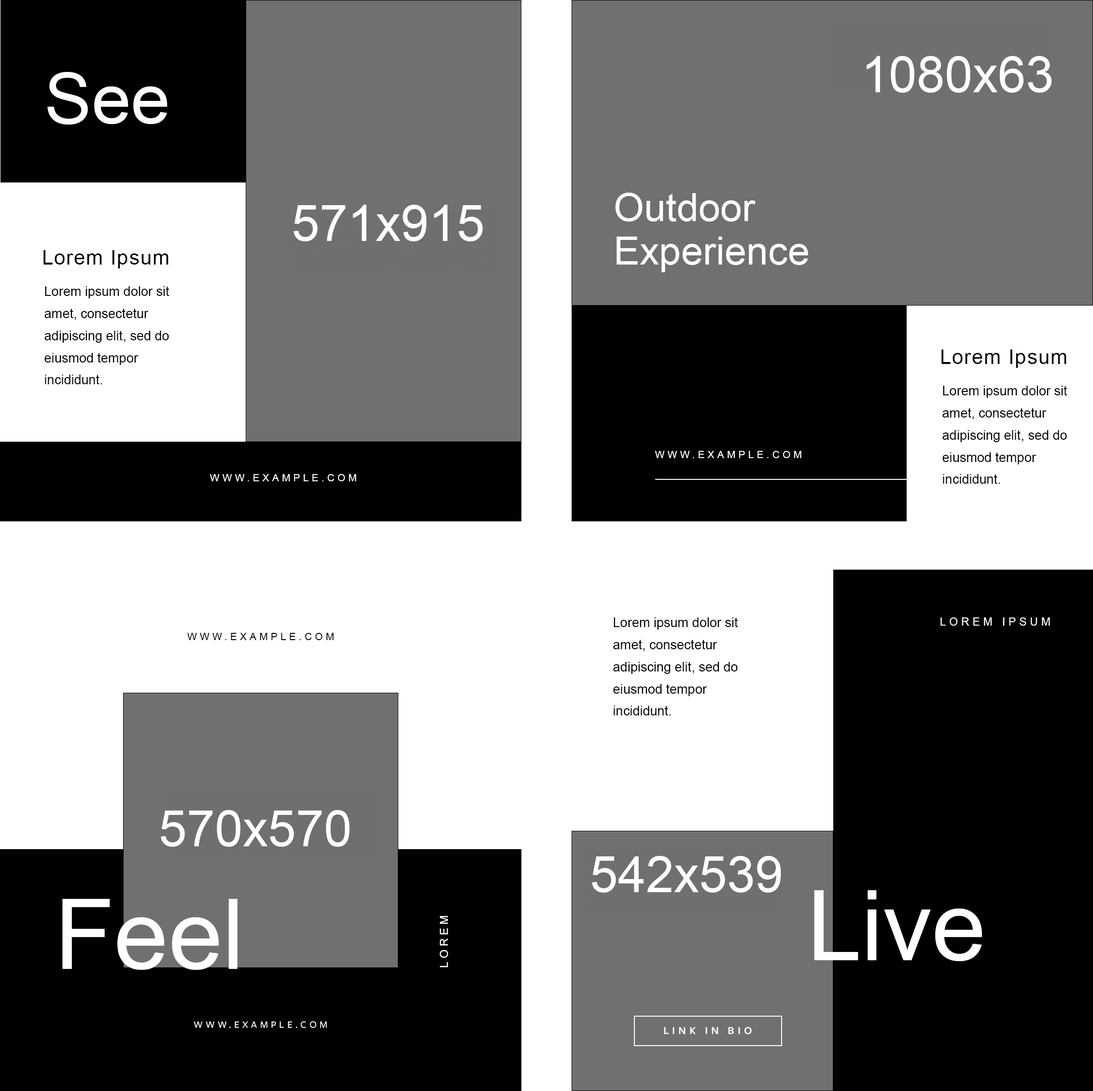
<style>
.page{position:relative;width:1093px;height:1091px;background:#000000}
.page>*{position:absolute;margin:0}
.t1{font:70.4px "ArialMT";color:#fefefe}
.t2{font:39.2px/43.4px "ArialMT";color:#ffffff}
.t3{font:20.1px "ArialMT";letter-spacing:0.05em;color:#000000}
.t4{font:13.1px/22.1px "ArialMT";color:#000000}
.t5{font:10.1px "ArialMT";letter-spacing:0.3em;color:#fefefe;text-transform:uppercase}
.t6{font:10.1px "ArialMT";letter-spacing:0.3em;color:#ffffff;text-transform:uppercase}
.t7{font:11.1px "ArialMT";letter-spacing:0.3em;color:#fefefe;text-transform:uppercase}
.t8{font:10.1px "ArialMT";letter-spacing:0.3em;color:#000000;text-transform:uppercase}
.t9{font:97.6px "ArialMT";color:#ffffff}
.t10{font:11.1px "ArialMT";letter-spacing:0.3em;color:#ffffff;text-transform:uppercase}
.t11{font:10.1px "FreightSansProMedium-Regular";letter-spacing:0.3em;color:#fefefe;text-transform:uppercase}
.t12{font:11.1px "FreightSansProSemibold-Regular";letter-spacing:0.3em;color:#fffefe;text-transform:uppercase}
</style>
<div class="page">
<p class="t1" style="left:47px;top:72px;width:121px;height:53px">See</p>
<p class="t2" style="left:615px;top:193px;width:193px;height:79px">Outdoor<br>Experience</p>
<p class="t3" style="left:43px;top:250px;width:125px;height:18px">Lorem Ipsum</p>
<p class="t4" style="left:44px;top:286px;width:125px;height:98px">Lorem ipsum dolor sit amet, consectetur adipiscing elit, sed do eiusmod tempor incididunt.</p>
<p class="t3" style="left:941px;top:350px;width:125px;height:18px">Lorem Ipsum</p>
<p class="t4" style="left:942px;top:386px;width:125px;height:98px">Lorem ipsum dolor sit amet, consectetur adipiscing elit, sed do eiusmod tempor incididunt.</p>
<p class="t5" style="left:655px;top:451px;width:146px;height:7px">www.example.com</p>
<p class="t6" style="left:210px;top:474px;width:146px;height:7px">www.EXAMPLE.com</p>
<p class="t4" style="left:613px;top:617px;width:125px;height:98px">Lorem ipsum dolor sit amet, consectetur adipiscing elit, sed do eiusmod tempor incididunt.</p>
<p class="t7" style="left:940px;top:617px;width:110px;height:9px">Lorem Ipsum</p>
<p class="t8" style="left:187px;top:633px;width:147px;height:7px">www.example.com</p>
<p class="t9" style="left:814px;top:890px;width:168px;height:71px">Live</p>
<p class="t9" style="left:62px;top:899px;width:176px;height:71px">Feel</p>
<p class="t10" style="left:439px;top:916px;width:9px;height:51px;rotate:-90deg">Lorem Ipsum</p>
<p class="t11" style="left:194px;top:1021px;width:133px;height:7px">www.example.com</p>
<p class="t12" style="left:664px;top:1027px;width:88px;height:8px">link in bio</p>
</div>
